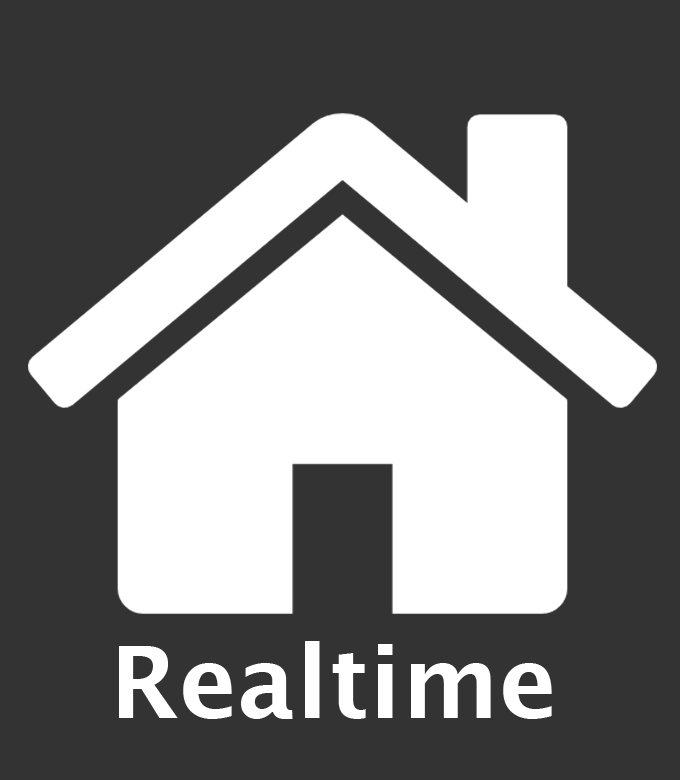
<style>
.page{position:relative;width:680px;height:780px;background:#333333}
.page>*{position:absolute;margin:0}
.t1{font:100px "LucidaGrande-Bold";color:#ffffff}
</style>
<div class="page">
<p class="t1" style="left:119px;top:641px;width:433px;height:78px">Realtime</p>
</div>
